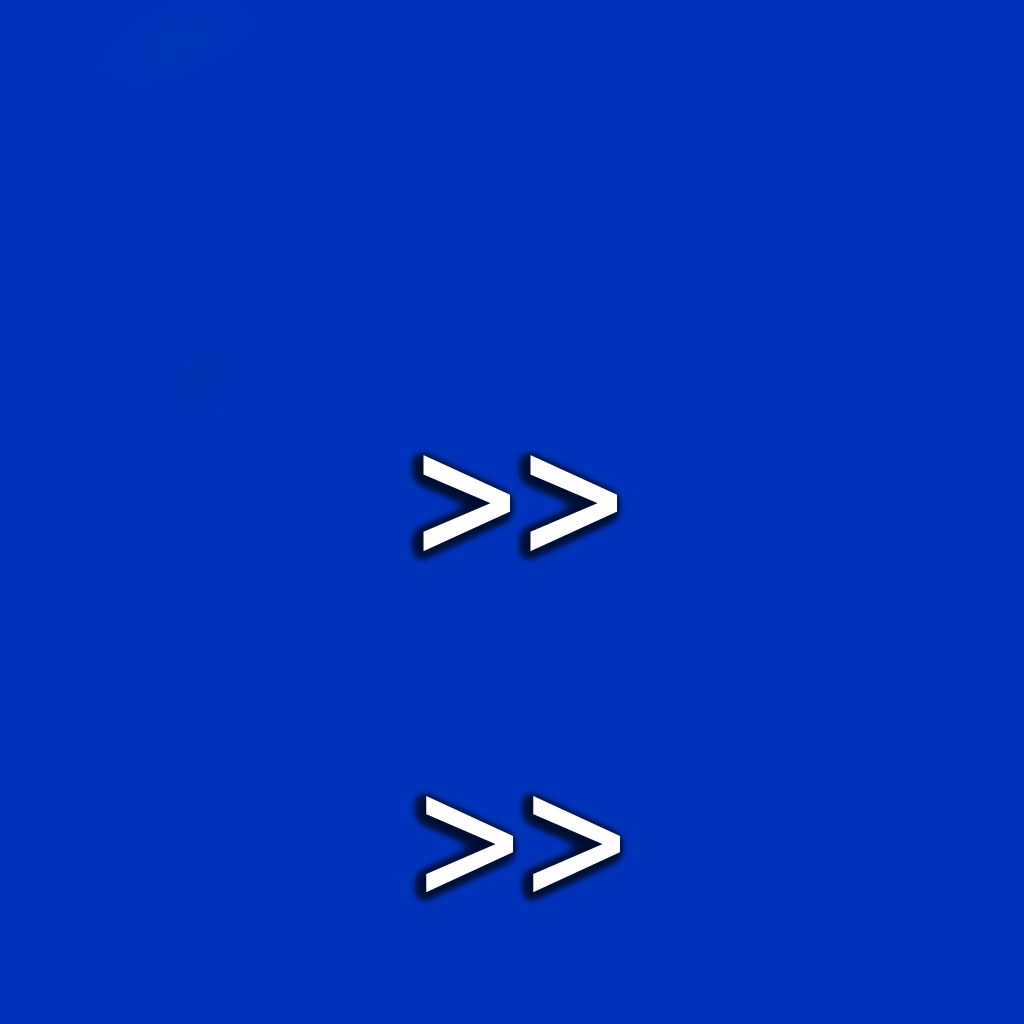
<style>
.page{position:relative;width:1024px;height:1024px;background:#0033bb}
.page>*{position:absolute;margin:0}
.t1{font:180px "MyriadPro-Bold";color:#fefeff}
.t2{font:180px "MyriadPro-BoldCond";color:#fefeff}
</style>
<div class="page">
<p class="t1" style="left:423px;top:455px;width:194px;height:96px">&gt;&gt;</p>
<p class="t2" style="left:426px;top:796px;width:194px;height:96px">&gt;&gt;</p>
</div>
